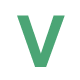
<style>
.page{position:relative;width:80px;height:80px;background:#ffffff}
.page>*{position:absolute;margin:0}
.t1{font:72px "Arial-BoldMT";color:#4ba575}
</style>
<div class="page">
<p class="t1" style="left:17px;top:15px;width:48px;height:52px">V</p>
</div>
